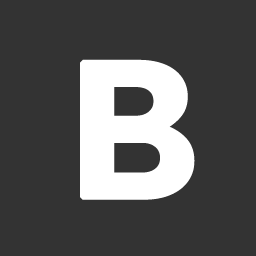
<style>
.page{position:relative;width:256px;height:256px;background:#333333}
.page>*{position:absolute;margin:0}
.t1{font:190px "BreezeSans-Bold";color:#ffffff;font-weight:bold;scale:1.05 1}
</style>
<div class="page">
<p class="t1" style="left:80px;top:59px;width:115px;height:141px">B</p>
</div>
